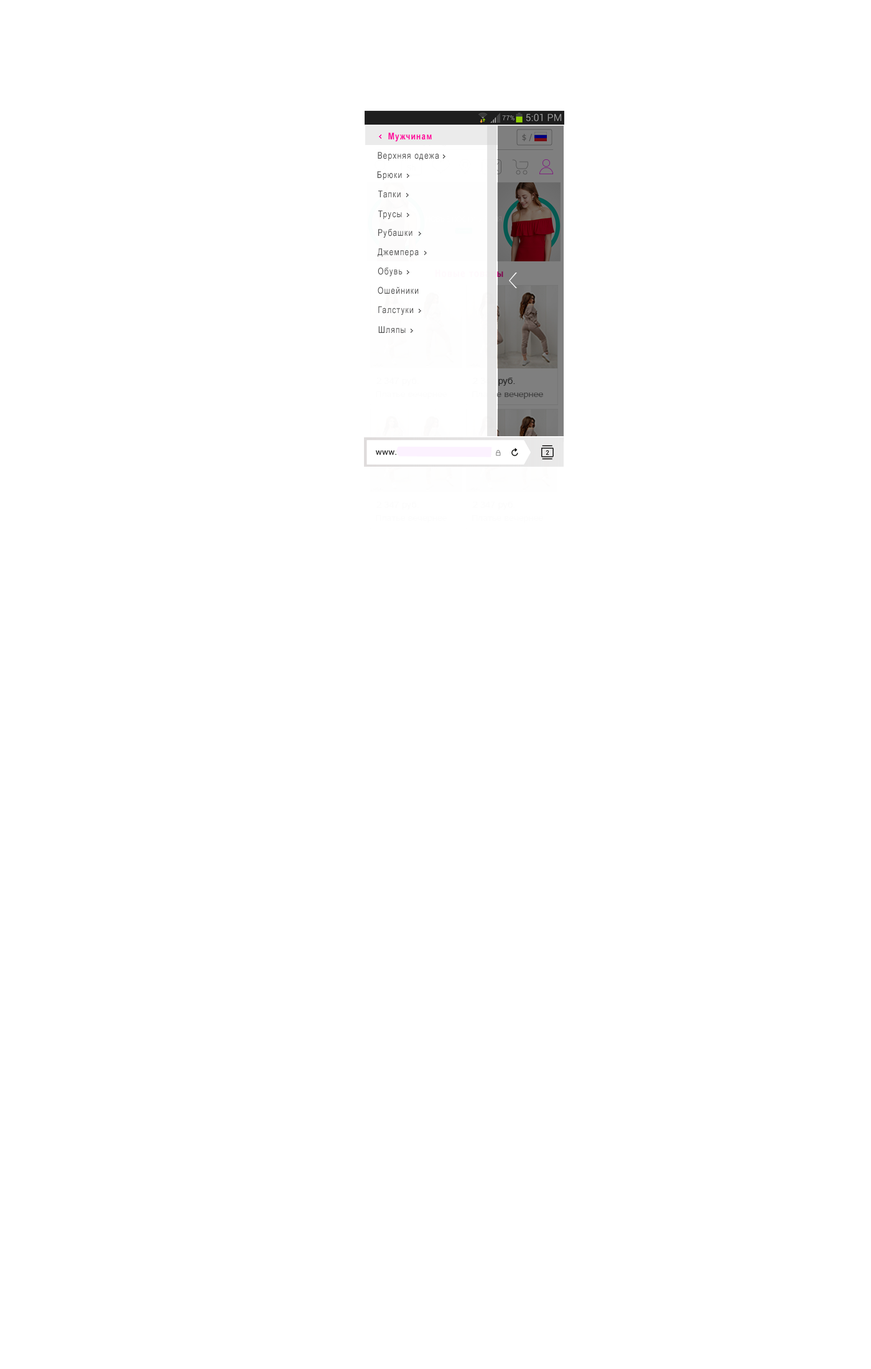
<style>
.page{position:relative;width:871px;height:1369px;background:#ffffff}
.page>*{position:absolute;margin:0}
.t1{font:9.3px "Arial-BoldMT";letter-spacing:0.1em;color:#fe009c;scale:0.8 1}
.t2{font:8.3px "Tahoma";color:#4e4e4e}
.t3{font:9.3px "ArialMT";letter-spacing:0.1em;color:#505050;scale:0.8 1}
</style>
<div class="page">
<p class="t1" style="left:388px;top:133px;width:44px;height:9px">Мужчинам</p>
<p class="t2" style="left:522px;top:134px;width:11px;height:7px">$ /</p>
<p class="t3" style="left:378px;top:152px;width:61px;height:9px">Верхняя одежа</p>
<p class="t3" style="left:377px;top:171px;width:25px;height:9px">Брюки</p>
<p class="t3" style="left:378px;top:190px;width:23px;height:8px">Тапки</p>
<p class="t3" style="left:378px;top:210px;width:24px;height:9px">Трусы</p>
<p class="t3" style="left:378px;top:229px;width:35px;height:9px">Рубашки</p>
<p class="t3" style="left:378px;top:248px;width:41px;height:9px">Джемпера</p>
<p class="t3" style="left:378px;top:268px;width:25px;height:8px">Обувь</p>
<p class="t3" style="left:378px;top:287px;width:41px;height:7px">Ошейники</p>
<p class="t3" style="left:378px;top:306px;width:35px;height:9px">Галстуки</p>
<p class="t3" style="left:378px;top:326px;width:28px;height:7px">Шляпы</p>
</div>
